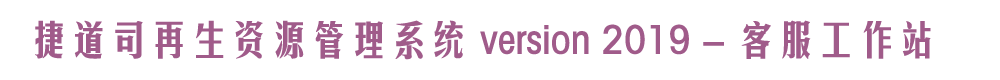
<style>
.page{position:relative;width:1000px;height:80px;background:#ffffff}
.page>*{position:absolute;margin:0}
.t1{font:40px "FZMHJW--GB1-0";color:#a05b8a}
</style>
<div class="page">
<p class="t1" style="left:35px;top:20px;width:896px;height:40px">捷道司再生资源管理系统 version 2019 - 客服工作站</p>
</div>
